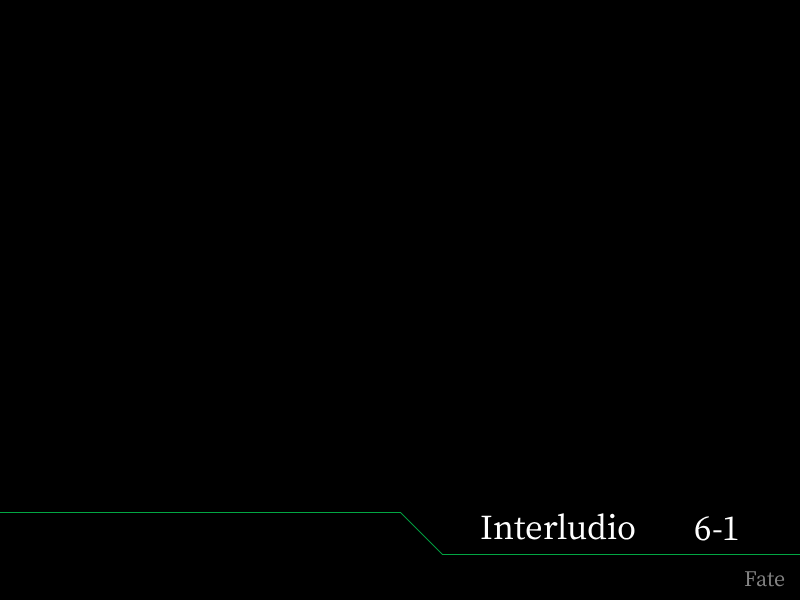
<style>
.page{position:relative;width:800px;height:600px;background:#000000}
.page>*{position:absolute;margin:0}
.t1{font:38px "OfficialFateFont-Medium";color:#ffffff}
.t2{font:24px "OfficialFateFont-Medium";color:#838383}
</style>
<div class="page">
<p class="t1" style="left:481px;top:513px;width:154px;height:27px">Interludio</p>
<p class="t1" style="left:695px;top:516px;width:43px;height:25px">6-1</p>
<p class="t2" style="left:744px;top:571px;width:41px;height:16px">Fate</p>
</div>
